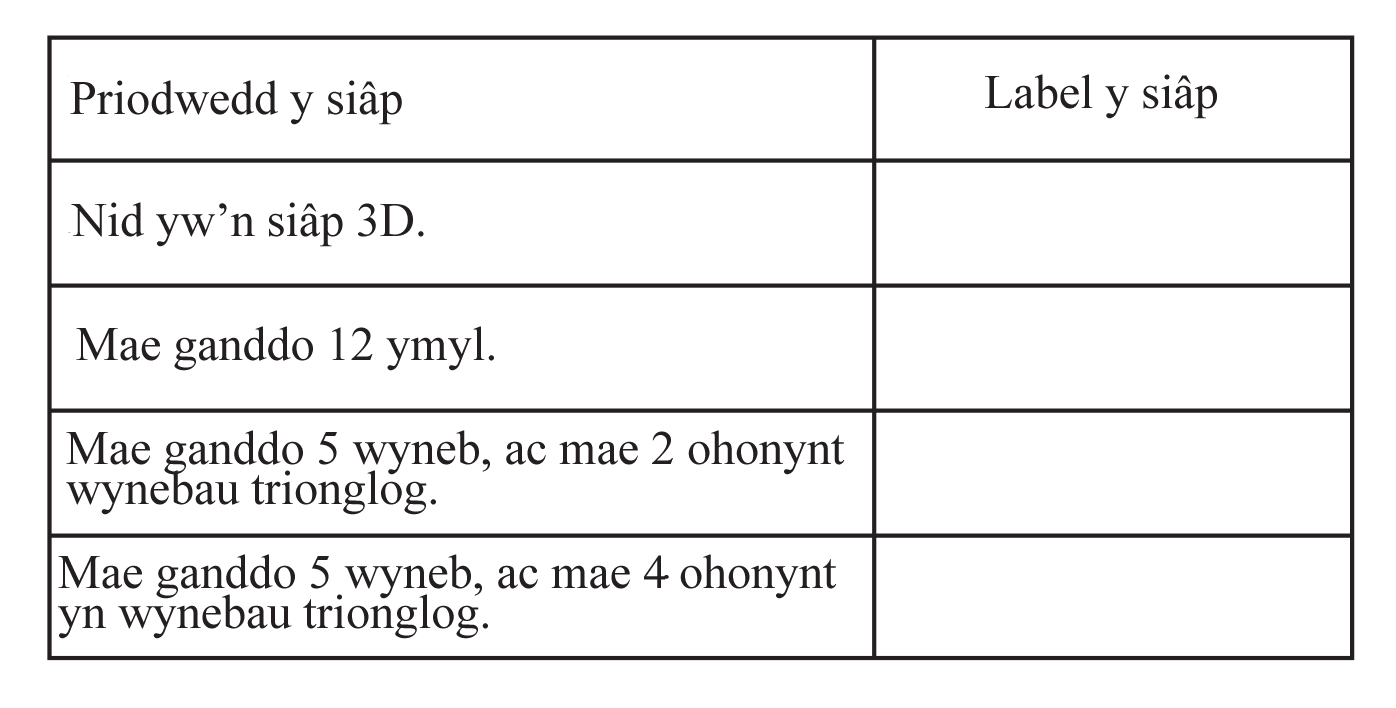
<style>
.page{position:relative;width:1396px;height:708px;background:#ffffff}
.page>*{position:absolute;margin:0}
.t1{font:48px "TimesNewRomanPSMT";color:#231f20}
.t2{font:48px/40px "TimesNewRomanPSMT";color:#231f20}
</style>
<div class="page">
<p class="t1" style="left:985px;top:74px;width:232px;height:45px">Label y siâp</p>
<p class="t1" style="left:70px;top:80px;width:332px;height:45px">Priodwedd y siâp</p>
<p class="t1" style="left:71px;top:202px;width:353px;height:45px">Nid yw’n siâp 3D.</p>
<p class="t1" style="left:76px;top:326px;width:418px;height:45px">Mae ganddo 12 ymyl.</p>
<p class="t2" style="left:66px;top:430px;width:779px;height:85px">Mae ganddo 5 wyneb, ac mae 2 ohonynt <br>wynebau trionglog.</p>
<p class="t2" style="left:58px;top:554px;width:779px;height:85px">Mae ganddo 5 wyneb, ac mae 4 ohonynt<br>yn wynebau trionglog.</p>
</div>
